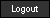
<style>
.page{position:relative;width:50px;height:18px;background:#333333}
.page>*{position:absolute;margin:0}
.t1{font:9px "ArialMT";color:#ffffff}
</style>
<div class="page">
<p class="t1" style="left:12px;top:5px;width:26px;height:9px">Logout</p>
</div>
